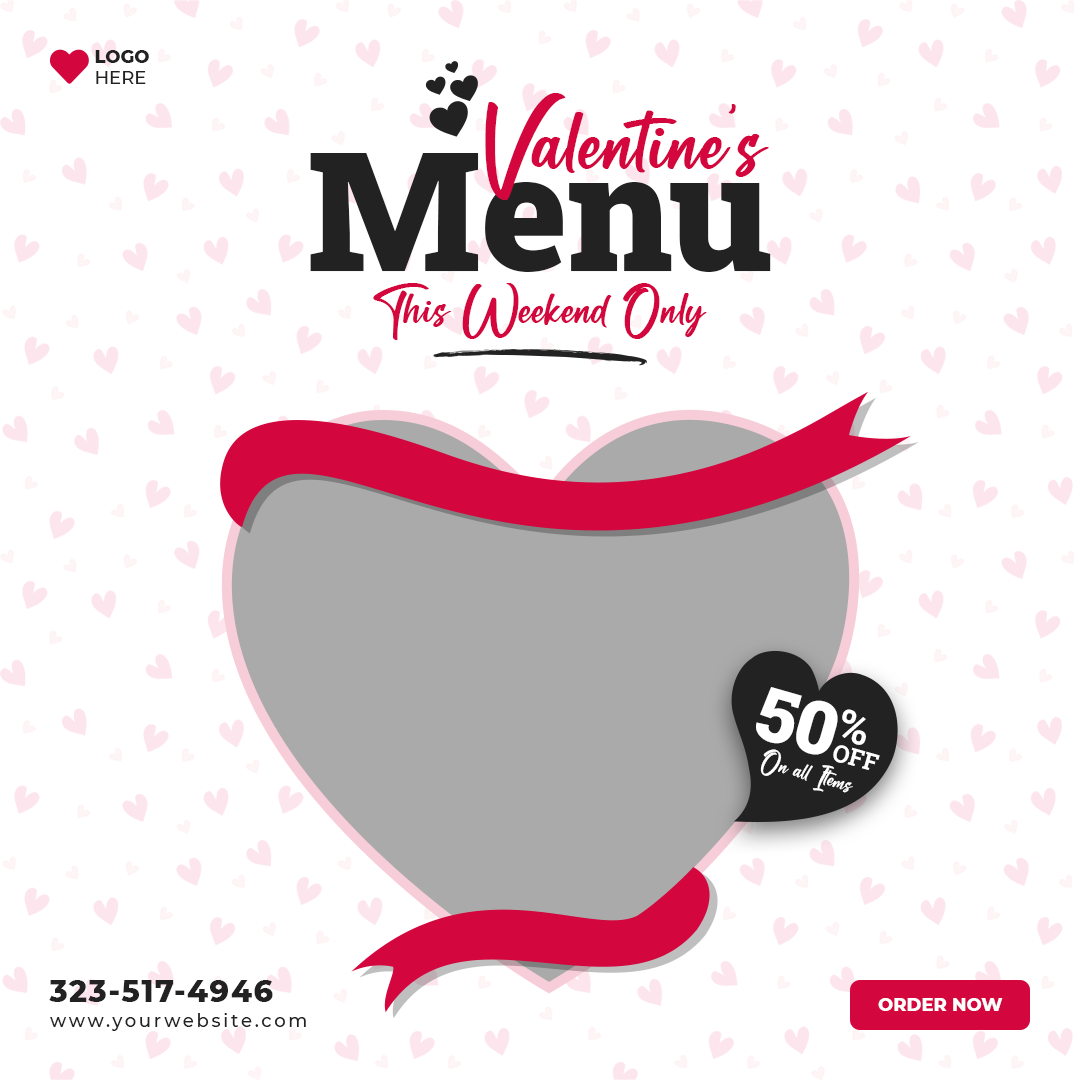
<style>
.page{position:relative;width:1080px;height:1080px;background:#ffffff}
.page>*{position:absolute;margin:0}
.t1{font:18px "Montserrat-ExtraBold";color:#222222;text-transform:uppercase}
.t2{font:18px "Montserrat-Medium";color:#222222;text-transform:uppercase}
.t3{font:100px "CottonCandies";color:#d3063e}
.t4{font:166px "RobotoSlab-Black";color:#222222}
.t5{font:54px "CottonCandies";color:#d3063e}
.t6{font:74px "RobotoSlab-Black";color:#ffffff}
.t7{font:44px "RobotoSlab-Bold";color:#ffffff}
.t8{font:26px "CottonCandies";color:#ffffff}
.t9{font:24px "RobotoSlab-Bold";color:#ffffff;text-transform:uppercase}
.t10{font:30.1px "Montserrat-ExtraBold";letter-spacing:0.05em;color:#222222}
.t11{font:18px "Montserrat-ExtraBold";color:#ffffff;text-transform:uppercase}
.t12{font:18px "Montserrat-Medium";letter-spacing:0.15em;color:#222222}
</style>
<div class="page">
<p class="t1" style="left:95px;top:50px;width:54px;height:34px">Logo<br><span class="t2">Here</span></p>
<p class="t3" style="left:485px;top:93px;width:284px;height:107px">Valentine’s</p>
<p class="t4" style="left:310px;top:153px;width:461px;height:119px">Menu</p>
<p class="t5" style="left:373px;top:283px;width:334px;height:57px">This Weekend Only</p>
<p class="t6" style="left:756px;top:687px;width:82px;height:68px;rotate:16deg">50</p>
<p class="t7" style="left:842px;top:709px;width:24px;height:36px;rotate:16deg">%</p>
<p class="t8" style="left:760px;top:749px;width:93px;height:44px;rotate:16deg">On all Items</p>
<p class="t9" style="left:833px;top:745px;width:47px;height:25px;rotate:16deg">Off</p>
<p class="t10" style="left:49px;top:980px;width:224px;height:22px">323-517-4946</p>
<p class="t11" style="left:878px;top:998px;width:125px;height:13px">Order Now</p>
<p class="t12" style="left:50px;top:1013px;width:256px;height:18px">www.yourwebsite.com</p>
</div>
